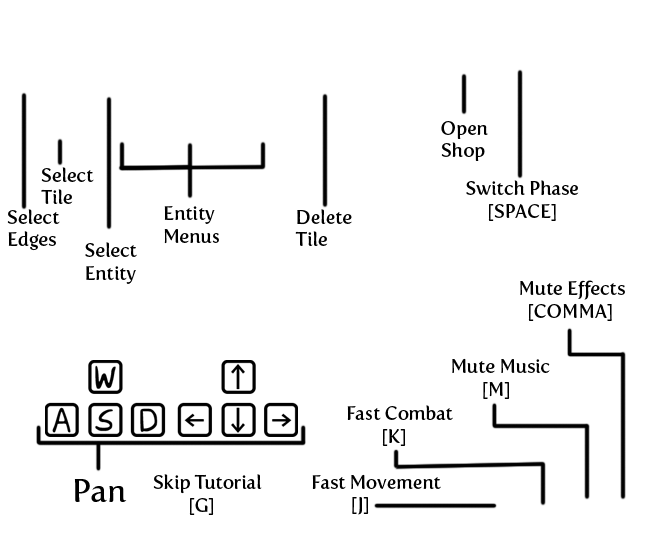
<style>
.page{position:relative;width:653px;height:534px;background:#ffffff}
.page>*{position:absolute;margin:0}
.t1{font:18.7px "FertigoPro-Regular";color:#000000}
.t2{font:32px "FertigoPro-Regular";color:#000000}
</style>
<div class="page">
<p class="t1" style="left:441px;top:121px;width:47px;height:40px">Open<br>Shop</p>
<p class="t1" style="left:41px;top:167px;width:53px;height:37px">Select<br>Tile</p>
<p class="t1" style="left:466px;top:180px;width:113px;height:41px">Switch Phase<br>     [SPACE]</p>
<p class="t1" style="left:7px;top:209px;width:53px;height:42px">Select<br>Edges</p>
<p class="t1" style="left:164px;top:206px;width:55px;height:38px">Entity<br>Menus</p>
<p class="t1" style="left:295px;top:209px;width:57px;height:37px">Delete<br>Tile</p>
<p class="t1" style="left:85px;top:242px;width:52px;height:42px">Select<br>Entity</p>
<p class="t1" style="left:520px;top:280px;width:105px;height:41px">Mute Effects<br>  [COMMA]</p>
<p class="t1" style="left:452px;top:358px;width:98px;height:41px">Mute Music<br>       [M]</p>
<p class="t1" style="left:347px;top:405px;width:106px;height:41px">Fast Combat<br>        [K]</p>
<p class="t2" style="left:74px;top:479px;width:53px;height:23px">Pan</p>
<p class="t1" style="left:153px;top:474px;width:109px;height:41px">Skip Tutorial<br>        [G]</p>
<p class="t1" style="left:312px;top:474px;width:129px;height:41px">Fast Movement<br>         [J]</p>
</div>
